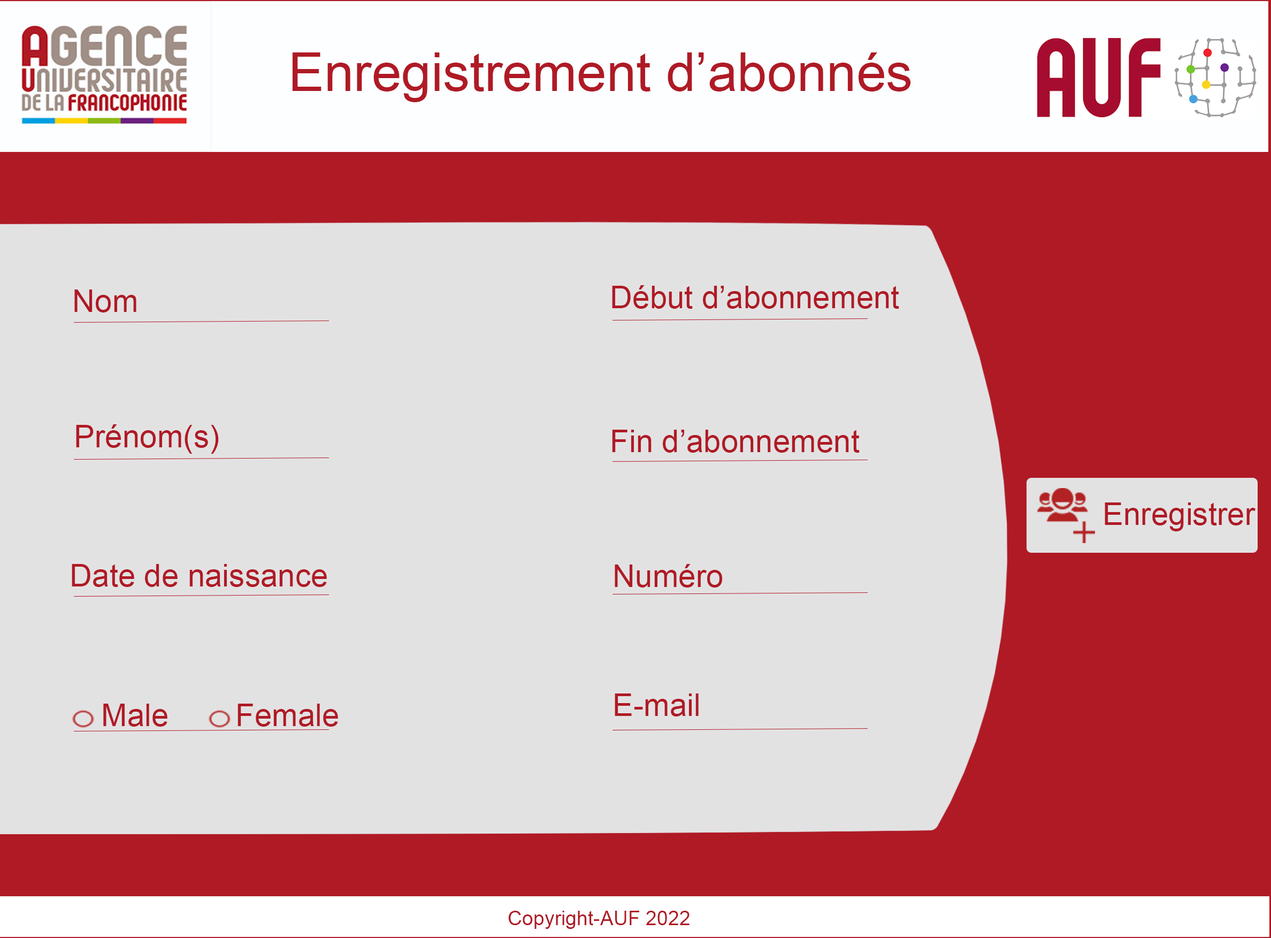
<style>
.page{position:relative;width:1271px;height:938px;background:#e3e2e3}
.page>*{position:absolute;margin:0}
.t1{font:53.5px "ArialMT";color:#af1a25}
.t2{font:31.2px "ArialMT";color:#af1a25}
.t3{font:20.1px "ArialMT";color:#af1a25}
</style>
<div class="page">
<p class="t1" style="left:292px;top:52px;width:619px;height:50px">Enregistrement d’abonnés</p>
<p class="t2" style="left:74px;top:289px;width:62px;height:23px">Nom</p>
<p class="t2" style="left:612px;top:285px;width:287px;height:24px">Début d’abonnement</p>
<p class="t2" style="left:76px;top:424px;width:143px;height:30px">Prénom(s)</p>
<p class="t2" style="left:612px;top:430px;width:248px;height:23px">Fin d’abonnement</p>
<p class="t2" style="left:1105px;top:502px;width:151px;height:29px">Enregistrer</p>
<p class="t2" style="left:72px;top:564px;width:255px;height:23px">Date de naissance</p>
<p class="t2" style="left:615px;top:564px;width:108px;height:23px">Numéro</p>
<p class="t2" style="left:615px;top:693px;width:84px;height:23px">E-mail</p>
<p class="t2" style="left:103px;top:704px;width:64px;height:23px">Male</p>
<p class="t2" style="left:238px;top:704px;width:100px;height:23px">Female</p>
<p class="t3" style="left:508px;top:911px;width:182px;height:18px">Copyright-AUF 2022</p>
</div>
